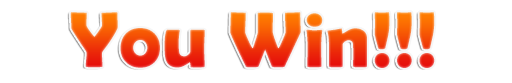
<style>
.page{position:relative;width:512px;height:83px;background:#ffffff}
.page>*{position:absolute;margin:0}
.t1{font:80px "BerlinSansFBDemi-Bold"}
</style>
<div class="page">
<p class="t1" style="left:70px;top:12px;width:365px;height:56px">You Win!!!</p>
</div>
